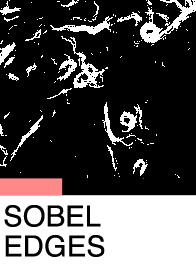
<style>
.page{position:relative;width:196px;height:264px;background:#000000}
.page>*{position:absolute;margin:0}
.t1{font:28.9px/30px "Helvetica";color:#000000}
</style>
<div class="page">
<p class="t1" style="left:4px;top:205px;width:101px;height:52px">SOBEL<br>EDGES</p>
</div>
